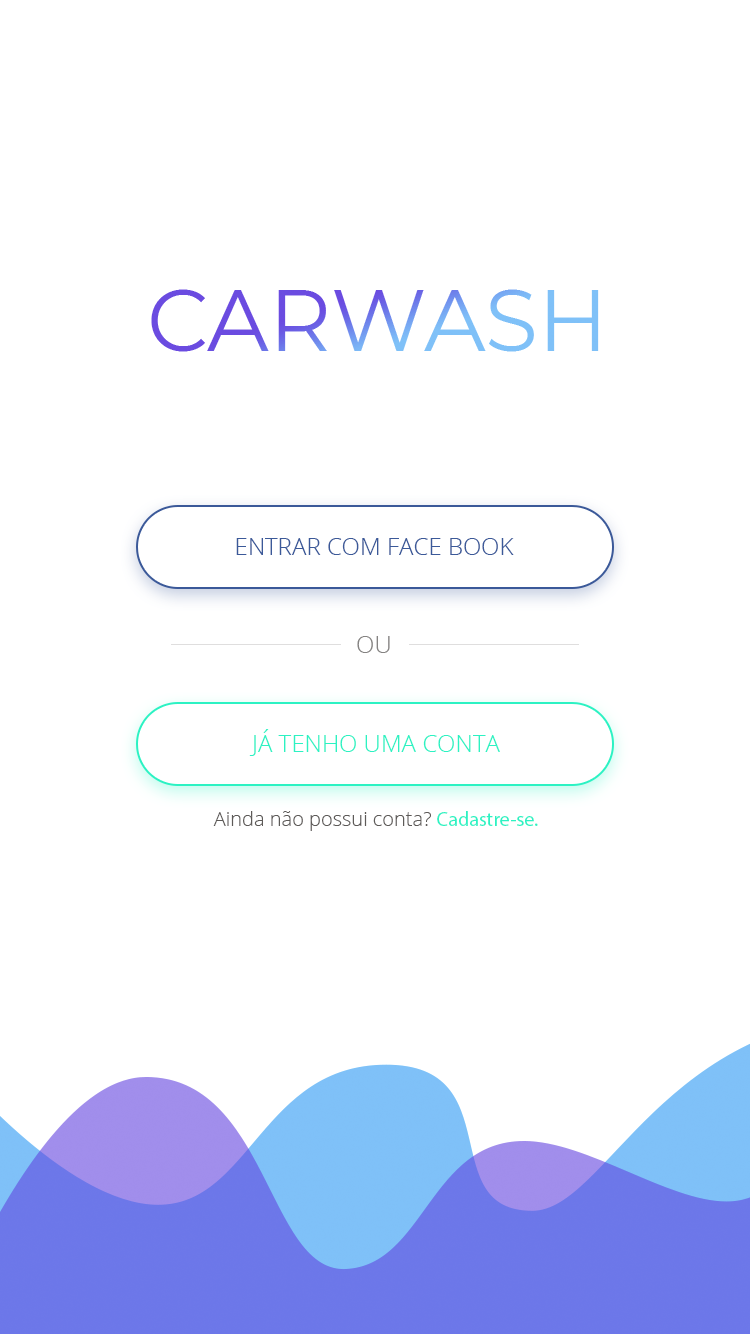
<style>
.page{position:relative;width:750px;height:1334px;background:#ffffff}
.page>*{position:absolute;margin:0}
.t1{font:24px "OpenSans-Light";color:#3b5999}
.t2{font:24px "OpenSans-Light";color:#858382}
.t3{font:24px "OpenSans-Light";color:#2cf2c3}
.t4{font:20px "OpenSans-Light";color:#5d5a58}
.t5{font:20px "MyriadPro-Regular";color:#2cf2c3}
</style>
<div class="page">
<p class="t1" style="left:236px;top:538px;width:278px;height:17px">ENTRAR COM FACE BOOK</p>
<p class="t2" style="left:357px;top:636px;width:33px;height:17px">OU</p>
<p class="t3" style="left:249px;top:729px;width:251px;height:27px">JÁ TENHO UMA CONTA</p>
<p class="t4" style="left:213px;top:811px;width:325px;height:20px">Ainda não possui conta? <span class="t5">Cadastre-se.</span></p>
</div>
